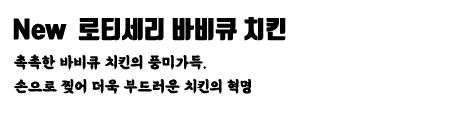
<style>
.page{position:relative;width:450px;height:120px;background:#ffffff}
.page>*{position:absolute;margin:0}
.t1{font:24.1px "TmonMonsoriBlack";color:#000000}
.t2{font:16px/24px "BMEULJIRO";color:#000000}
</style>
<div class="page">
<p class="t1" style="left:13px;top:17px;width:273px;height:24px">New  로티세리 바비큐 치킨</p>
<p class="t2" style="left:14px;top:54px;width:237px;height:40px">촉촉한 바비큐 치킨의 풍미가득.<br>손으로 찢어 더욱 부드러운 치킨의 혁명</p>
</div>
